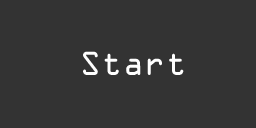
<style>
.page{position:relative;width:256px;height:128px;background:#333333}
.page>*{position:absolute;margin:0}
.t1{font:30px "OCRAStd";color:#ffffff}
</style>
<div class="page">
<p class="t1" style="left:83px;top:51px;width:101px;height:24px">Start</p>
</div>
